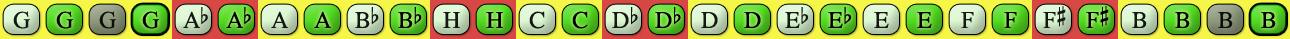
<style>
.page{position:relative;width:1290px;height:39px}
.page>*{position:absolute;margin:0}
.t1{font:24px "OpusChords";color:#000000}
.t2{font:24px "OpusChords";letter-spacing:-0.05em;color:#000000}
</style>
<div class="page">
<p class="t1" style="left:1043px;top:6px;width:23px;height:22px;opacity:0.9">F#</p>
<p class="t1" style="left:1086px;top:6px;width:23px;height:22px">F#</p>
<p class="t1" style="left:13px;top:11px;width:17px;height:18px;opacity:0.9">G</p>
<p class="t1" style="left:56px;top:11px;width:17px;height:18px">G</p>
<p class="t1" style="left:99px;top:11px;width:17px;height:18px;opacity:0.9">G</p>
<p class="t1" style="left:142px;top:11px;width:17px;height:18px">G</p>
<p class="t2" style="left:183px;top:7px;width:25px;height:21px;opacity:0.9">Ab</p>
<p class="t2" style="left:226px;top:7px;width:25px;height:21px">Ab</p>
<p class="t1" style="left:271px;top:11px;width:17px;height:17px;opacity:0.9">A</p>
<p class="t1" style="left:314px;top:11px;width:17px;height:17px">A</p>
<p class="t1" style="left:355px;top:7px;width:24px;height:21px;opacity:0.9">Bb</p>
<p class="t1" style="left:398px;top:7px;width:24px;height:21px">Bb</p>
<p class="t1" style="left:443px;top:12px;width:17px;height:16px;opacity:0.9">H</p>
<p class="t1" style="left:486px;top:12px;width:17px;height:16px">H</p>
<p class="t1" style="left:529px;top:11px;width:16px;height:18px;opacity:0.9">C</p>
<p class="t1" style="left:572px;top:11px;width:16px;height:18px">C</p>
<p class="t1" style="left:612px;top:7px;width:26px;height:21px;opacity:0.9">Db</p>
<p class="t1" style="left:655px;top:7px;width:26px;height:21px">Db</p>
<p class="t1" style="left:701px;top:12px;width:17px;height:16px;opacity:0.9">D</p>
<p class="t1" style="left:744px;top:12px;width:17px;height:16px">D</p>
<p class="t1" style="left:785px;top:7px;width:24px;height:21px;opacity:0.9">Eb</p>
<p class="t1" style="left:828px;top:7px;width:24px;height:21px">Eb</p>
<p class="t1" style="left:874px;top:12px;width:15px;height:16px;opacity:0.9">E</p>
<p class="t1" style="left:917px;top:12px;width:15px;height:16px">E</p>
<p class="t1" style="left:961px;top:12px;width:13px;height:16px;opacity:0.9">F</p>
<p class="t1" style="left:1004px;top:12px;width:13px;height:16px">F</p>
<p class="t1" style="left:1132px;top:12px;width:15px;height:16px;opacity:0.9">B</p>
<p class="t1" style="left:1175px;top:12px;width:15px;height:16px">B</p>
<p class="t1" style="left:1218px;top:12px;width:15px;height:16px;opacity:0.9">B</p>
<p class="t1" style="left:1261px;top:12px;width:15px;height:16px">B</p>
</div>
